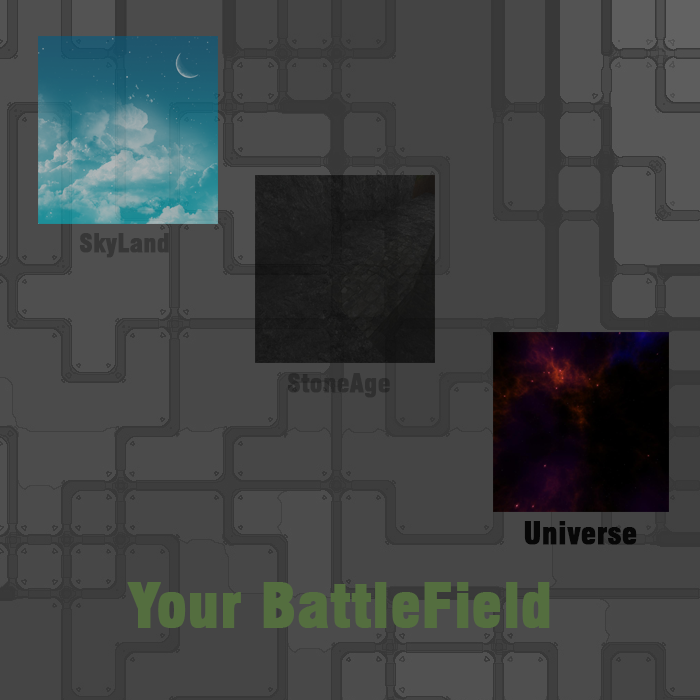
<style>
.page{position:relative;width:700px;height:700px}
.page>*{position:absolute;margin:0}
.t1{font:25px "Swiss721BT-BlackCondensed";color:#373737;font-weight:bold}
.t2{font:25px "Swiss721BT-BlackCondensed";color:#303030;font-weight:bold}
.t3{font:30px "Swiss721BT-BlackCondensed";color:#070707;font-weight:bold}
.t4{font:60px "Swiss721BT-BlackCondensed";color:#546e3f;font-weight:bold}
</style>
<div class="page">
<p class="t1" style="left:79px;top:233px;width:90px;height:25px">SkyLand</p>
<p class="t2" style="left:287px;top:373px;width:103px;height:25px">StoneAge</p>
<p class="t3" style="left:524px;top:521px;width:113px;height:24px">Universe</p>
<p class="t4" style="left:127px;top:582px;width:423px;height:46px">Your BattleField</p>
</div>
